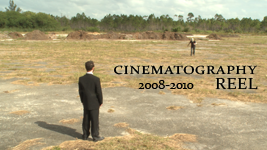
<style>
.page{position:relative;width:267px;height:150px}
.page>*{position:absolute;margin:0}
.t1{font:16px "Constantia";color:#000000;font-variant:small-caps;scale:1.14 1}
.t2{font:12.8px "Constantia";color:#000000;font-variant:small-caps}
</style>
<div class="page">
<p class="t1" style="left:114px;top:65px;width:143px;height:10px">cinematography</p>
<p class="t1" style="left:215px;top:77px;width:43px;height:13px">REEL</p>
<p class="t2" style="left:138px;top:80px;width:56px;height:9px">2008-2010</p>
</div>
